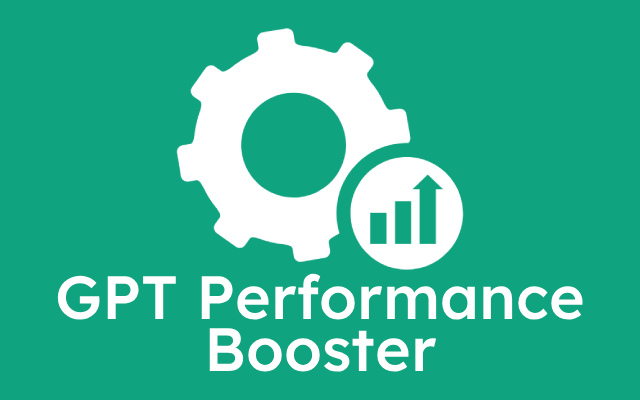
<style>
.page{position:relative;width:640px;height:400px;background:#10a37f}
.page>*{position:absolute;margin:0}
.t1{font:61px "Lexend-Medium";color:#ffffff}
</style>
<div class="page">
<p class="t1" style="left:57px;top:273px;width:526px;height:47px">GPT Performance</p>
<p class="t1" style="left:209px;top:328px;width:228px;height:44px">Booster</p>
</div>
